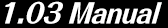
<style>
.page{position:relative;width:168px;height:28px;background:#000000}
.page>*{position:absolute;margin:0}
.t1{font:27.5px "FolkPro-Heavy";color:#ffffff;scale:0.87 1}
</style>
<div class="page">
<p class="t1" style="left:5px;top:1px;width:157px;height:23px">1.03 Manual</p>
</div>
